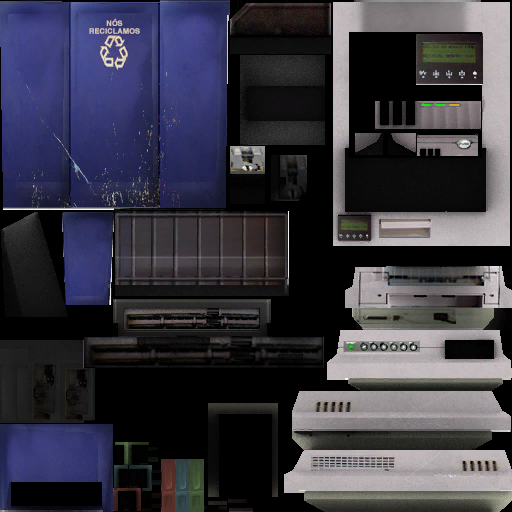
<style>
.page{position:relative;width:512px;height:512px;background:#000000}
.page>*{position:absolute;margin:0}
.t1{font:7.1px/7.8px "Helvetica-Bold";letter-spacing:0.01em;color:#d6c3b5;text-transform:uppercase;font-weight:bold}
</style>
<div class="page">
<p class="t1" style="left:89px;top:18px;width:51px;height:16px;text-align:center">NóS<br>RECICLAMOS</p>
</div>
